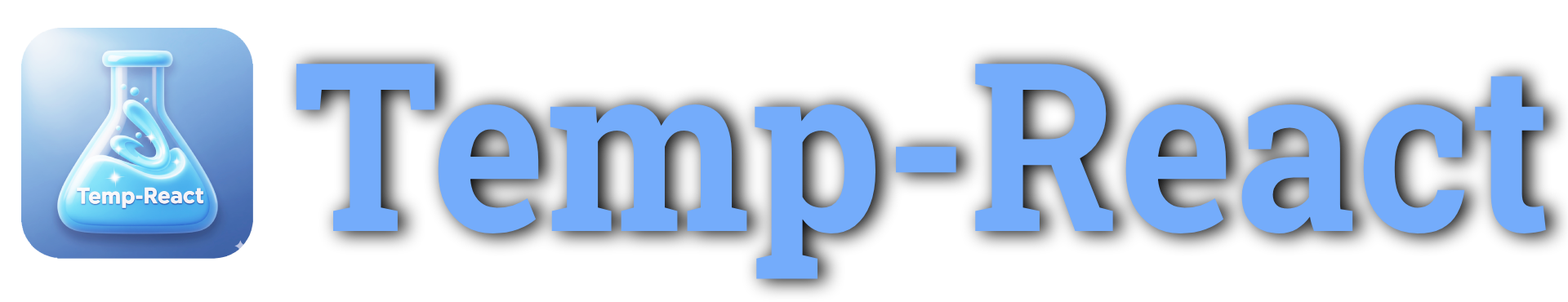
<style>
.page{position:relative;width:1568px;height:302px;background:#ffffff}
.page>*{position:absolute;margin:0}
.t1{font:235.2px "RobotoSlab-Bold";color:#74acfb;scale:0.93 1}
</style>
<div class="page">
<p class="t1" style="left:296px;top:64px;width:1250px;height:215px">Temp-React</p>
</div>
